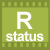
<style>
.page{position:relative;width:50px;height:50px;background:#a3b746}
.page>*{position:absolute;margin:0}
.t1{font:24px "Arial-BoldMT";letter-spacing:-0.04em;color:#fdfaf9}
.t2{font:14px "Arial-BoldMT";letter-spacing:-0.04em;color:#fdfaf9}
</style>
<div class="page">
<p class="t1" style="left:17px;top:11px;width:16px;height:18px">R</p>
<p class="t2" style="left:6px;top:31px;width:38px;height:11px">status</p>
</div>
